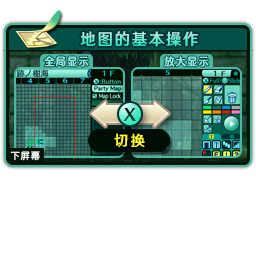
<style>
.page{position:relative;width:256px;height:256px;background:#ffffff}
.page>*{position:absolute;margin:0}
.t1{font:16px "HYWenHei-FEW";letter-spacing:0.105em;scale:0.97 1}
.t2{font:10.7px "FZFW-QingYinTiS-B--GB1-0";letter-spacing:0.105em;color:#8aeee1;scale:0.97 1}
.t3{font:14.7px "HYWenHei-FEW";letter-spacing:0.165em;color:#fdff2c;scale:0.97 1}
.t4{font:9.3px "FZY3--GB1-4";letter-spacing:0.105em;color:#ffffff;scale:0.97 1}
</style>
<div class="page">
<p class="t1" style="left:80px;top:31px;width:118px;height:16px">地图的基本操作</p>
<p class="t2" style="left:44px;top:56px;width:45px;height:11px">全局显示</p>
<p class="t2" style="left:164px;top:56px;width:45px;height:11px">放大显示</p>
<p class="t3" style="left:114px;top:133px;width:31px;height:15px">切换</p>
<p class="t4" style="left:10px;top:151px;width:30px;height:10px">下屏幕</p>
</div>
